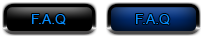
<style>
.page{position:relative;width:205px;height:40px;background:#ffffff}
.page>*{position:absolute;margin:0}
.t1{font:14px "ArialMT";color:#068afa}
</style>
<div class="page">
<p class="t1" style="left:32px;top:14px;width:34px;height:11px">F.A.Q</p>
<p class="t1" style="left:136px;top:14px;width:34px;height:11px">F.A.Q</p>
</div>
